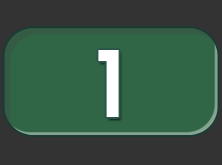
<style>
.page{position:relative;width:222px;height:165px;background:#306645}
.page>*{position:absolute;margin:0}
.t1{font:90px "AvantGarde-Demi";color:#ffffff}
</style>
<div class="page">
<p class="t1" style="left:98px;top:50px;width:21px;height:67px">1</p>
</div>
